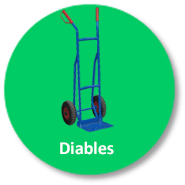
<style>
.page{position:relative;width:185px;height:185px;background:#00cc66}
.page>*{position:absolute;margin:0}
.t1{font:18px "Calibri-Bold";color:#ffffff}
</style>
<div class="page">
<p class="t1" style="left:60px;top:141px;width:54px;height:14px">Diables</p>
</div>
